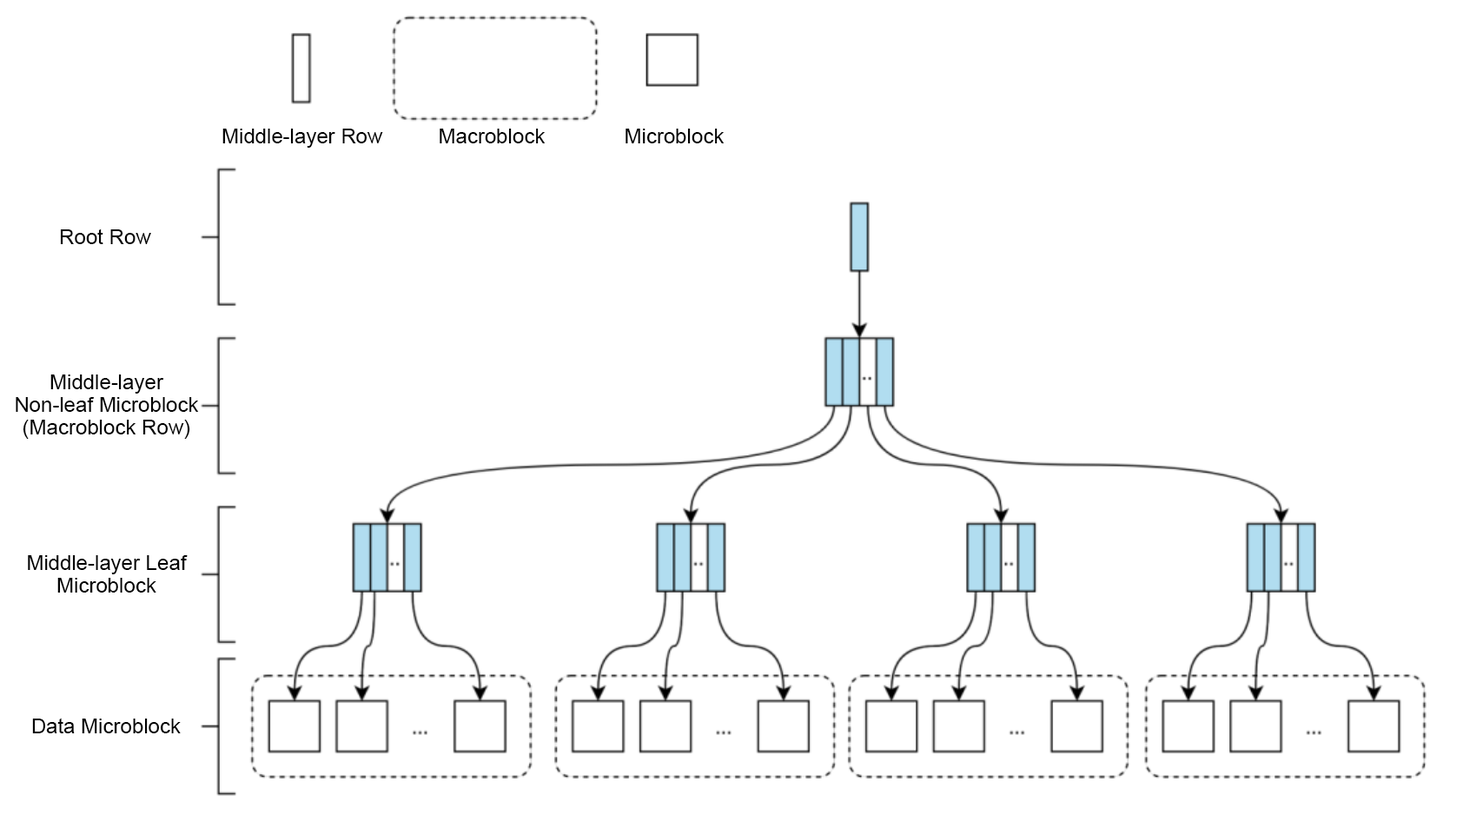
<style>
.page{position:relative;width:1463px;height:815px;background:#ffffff}
.page>*{position:absolute;margin:0}
.t1{font:20.9px "ArialMT";color:#000000}
.t2{font:10.4px "ArialMT";color:#000000}
.t3{font:10.4px/22.6px "ArialMT";color:#000000}
</style>
<div class="page">
<p class="t1" style="left:222px;top:129px;width:161px;height:19px">Middle-layer Row</p>
<p class="t2" style="left:440px;top:129px;width:106px;height:14px">Macroblock</p>
<p class="t2" style="left:626px;top:129px;width:99px;height:14px">Microblock</p>
<p class="t2" style="left:60px;top:229px;width:91px;height:15px">Root Row</p>
<p class="t3" style="left:16px;top:374px;width:183px;height:65px;text-align:center">Middle-layer Non-leaf Microblock<br>(Macroblock Row)</p>
<p class="t3" style="left:28px;top:555px;width:160px;height:38px;text-align:center">Middle-layer Leaf Microblock</p>
<p class="t2" style="left:32px;top:718px;width:149px;height:15px">Data Microblock</p>
</div>
